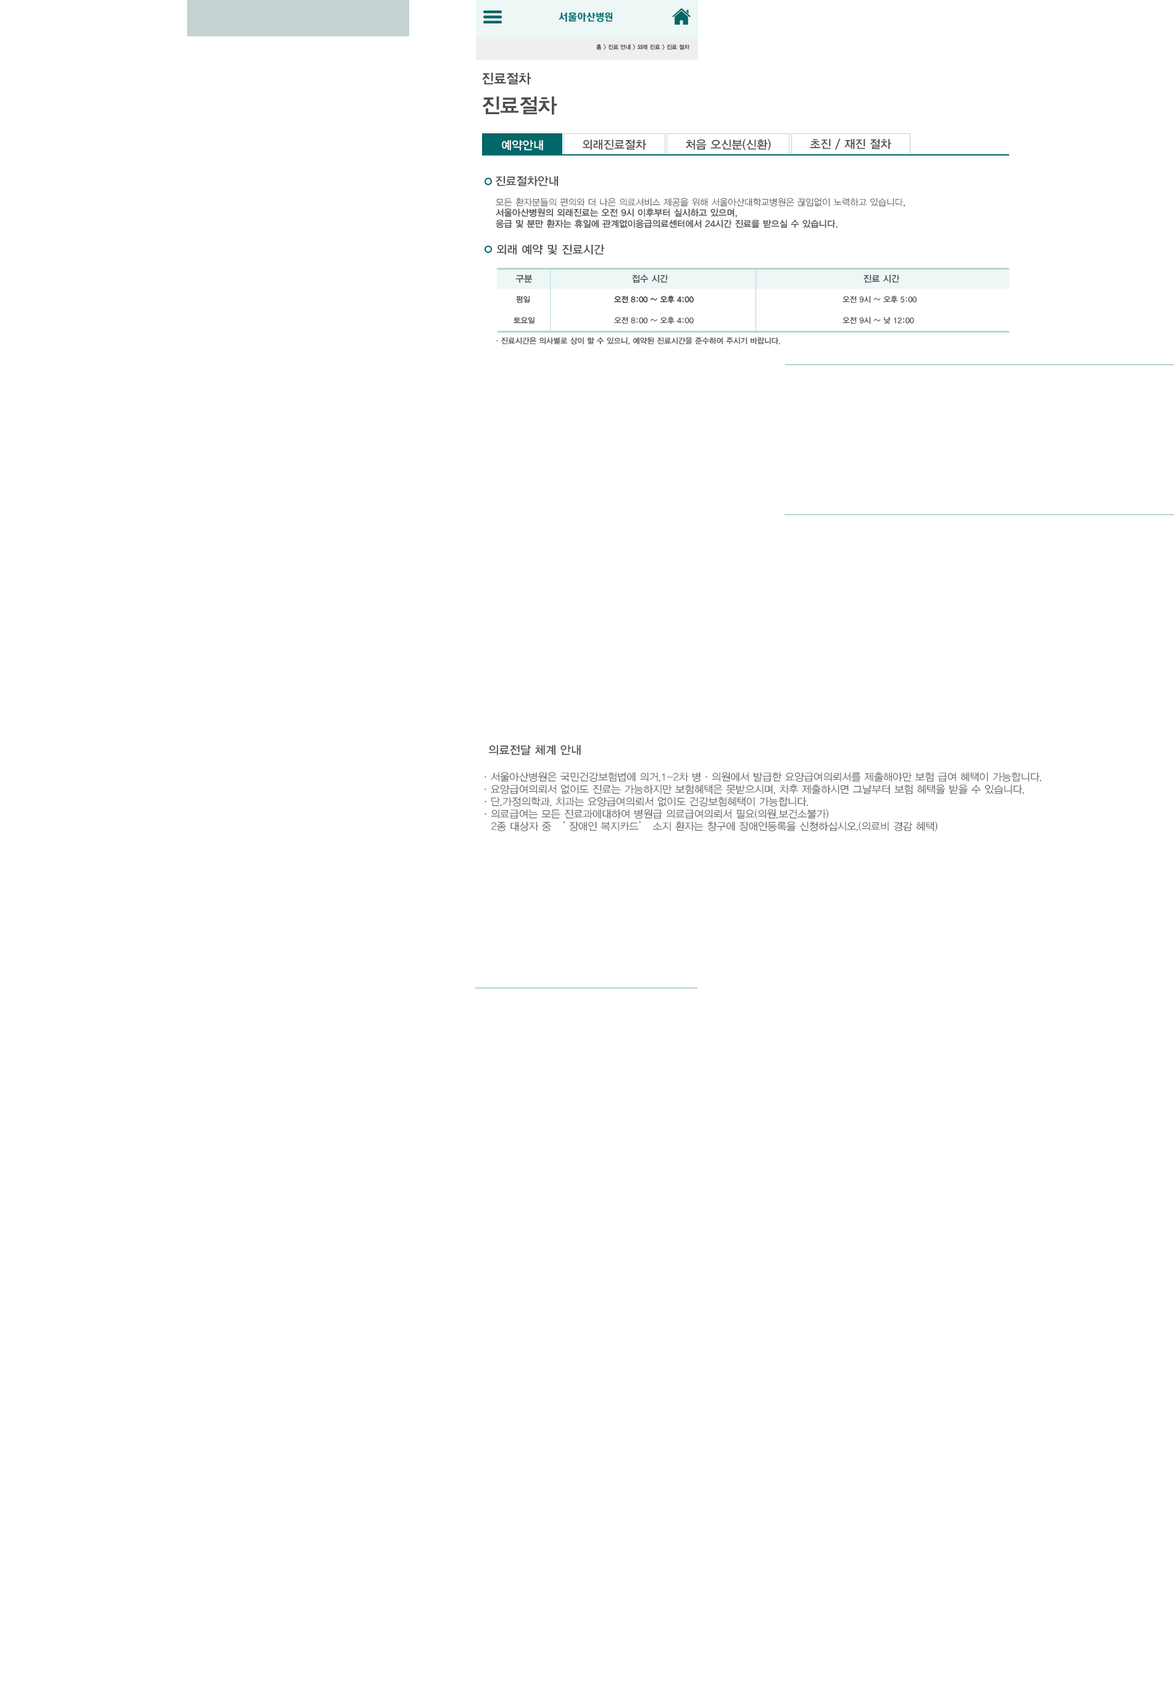
<style>
.page{position:relative;width:1174px;height:1684px;background:#ffffff}
.page>*{position:absolute;margin:0}
.t1{font:5.7px "YDIYGO330";color:#4c4d4f}
.t2{font:13.6px "YDIYGO340";color:#4c4d4f}
.t3{font:20.6px "YDIYGO340";color:#4c4d4f}
.t4{font:11.6px "YDIYGO330";color:#ffffff}
.t5{font:11.6px "YDIYGO330";color:#4c4d4f}
.t6{font:9px "YDIYGO330";color:#4c4d4f}
.t7{font:9px "YDIYGO310";color:#4c4d4f}
.t8{font:7.7px "YDIYGO330";color:#4c4d4f}
.t9{font:10.3px "YDIYGO310";color:#4c4d4f}
</style>
<div class="page">
<p class="t1" style="left:596px;top:44px;width:94px;height:6px">홈 &gt; 진료 안내 &gt; 외래 진료 &gt; 진료 절차</p>
<p class="t2" style="left:482px;top:72px;width:49px;height:13px">진료절차</p>
<p class="t3" style="left:482px;top:96px;width:75px;height:19px">진료절차</p>
<p class="t4" style="left:502px;top:140px;width:41px;height:11px">예약안내</p>
<p class="t5" style="left:583px;top:139px;width:63px;height:11px">외래진료절차</p>
<p class="t5" style="left:686px;top:139px;width:85px;height:12px">처음 오신분(신환)</p>
<p class="t5" style="left:810px;top:138px;width:81px;height:12px">초진 / 재진 절차</p>
<p class="t5" style="left:496px;top:176px;width:63px;height:10px">진료절차안내</p>
<p class="t6" style="left:496px;top:198px;width:409px;height:30px"><span class="t7">모든 환자분들의 편의와 더 나은 의료서비스 제공을 위해 서울아산대학교병원은 끊임없이 노력하고 있습니다</span>.<br>서울아산병원의 외래진료는 오전 9시 이후부터 실시하고 있으며,<br>응급 및 분만 환자는 휴일에 관계없이응급의료센터에서 24시간 진료를 받으실 수 있습니다.</p>
<p class="t5" style="left:497px;top:244px;width:108px;height:11px">외래 예약 및 진료시간</p>
<p class="t6" style="left:515px;top:275px;width:18px;height:8px">구분</p>
<p class="t6" style="left:632px;top:275px;width:36px;height:8px">접수 시간</p>
<p class="t6" style="left:863px;top:275px;width:37px;height:8px">진료 시간</p>
<p class="t8" style="left:516px;top:296px;width:14px;height:8px">평일</p>
<p class="t8" style="left:614px;top:296px;width:80px;height:7px">오전 8:00 ~ 오후 4:00</p>
<p class="t8" style="left:614px;top:296px;width:80px;height:7px">오전 8:00 ~ 오후 4:00</p>
<p class="t8" style="left:842px;top:296px;width:75px;height:7px">오전 9시 ~ 오후 5:00</p>
<p class="t8" style="left:513px;top:317px;width:21px;height:7px">토요일</p>
<p class="t8" style="left:614px;top:317px;width:80px;height:7px">오전 8:00 ~ 오후 4:00</p>
<p class="t8" style="left:842px;top:317px;width:72px;height:7px">오전 9시 ~ 낮 12:00</p>
<p class="t8" style="left:496px;top:337px;width:284px;height:8px">ㆍ진료시간은 의사별로 상이 할 수 있으니, 예약된 진료시간을 준수하여 주시기 바랍니다.</p>
<p class="t5" style="left:488px;top:745px;width:93px;height:10px">의료전달 체계 안내</p>
<p class="t9" style="left:484px;top:772px;width:557px;height:59px">ㆍ서울아산병원은 국민건강보험법에 의거,1-2차 병ㆍ의원에서 발급한 요양급여의뢰서를 제출해야만 보험 급여 혜택이 가능합니다.<br>ㆍ요양급여의뢰서 없이도 진료는 가능하지만 보험혜택은 못받으시며, 차후 제출하시면 그날부터 보험 혜택을 받을 수 있습니다.<br>ㆍ단,가정의학과, 치과는 요양급여의뢰서 없이도 건강보험혜택이 가능합니다.<br>ㆍ의료급여는 모든 진료과에대하여 병원급 의료급여의뢰서 필요(의원,보건소불가)<br>   2종 대상자 중 ‘ 장애인 복지카드’ 소지 환자는 창구에 장애인등록을 신청하십시오.(의료비 경감 혜택)</p>
</div>
